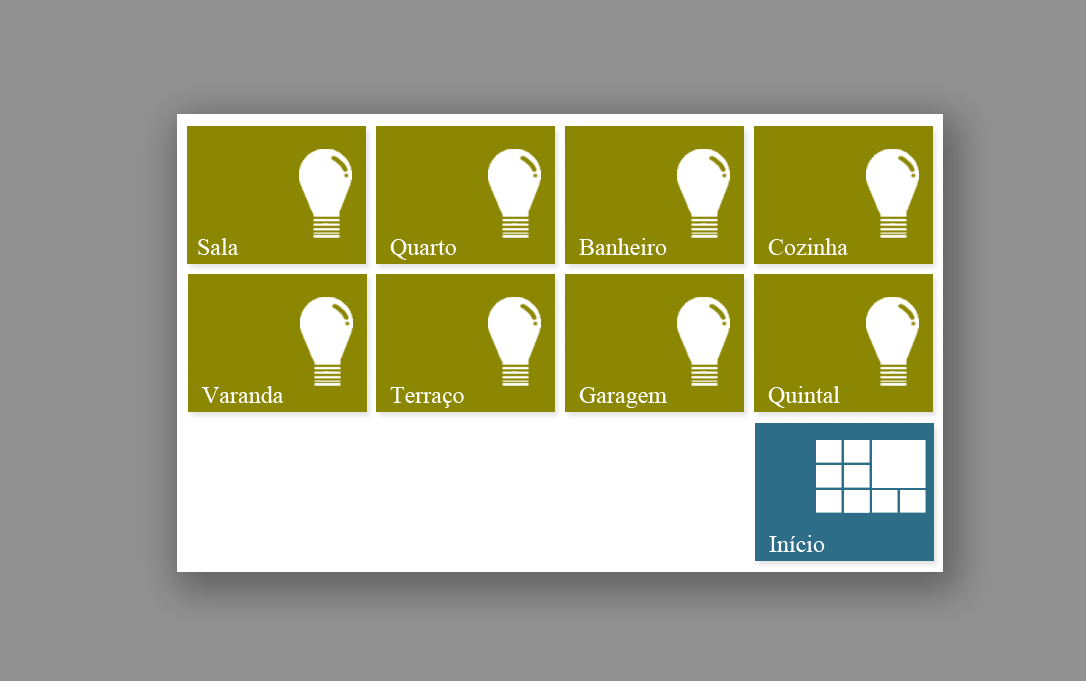
<style>
.page{position:relative;width:1086px;height:681px;background:#919191}
.page>*{position:absolute;margin:0}
.t1{font:24px "TimesNewRomanPSMT";color:#ffffff}
</style>
<div class="page">
<p class="t1" style="left:390px;top:239px;width:66px;height:21px">Quarto</p>
<p class="t1" style="left:579px;top:238px;width:88px;height:17px">Banheiro</p>
<p class="t1" style="left:768px;top:238px;width:80px;height:17px">Cozinha</p>
<p class="t1" style="left:202px;top:386px;width:82px;height:17px">Varanda</p>
<p class="t1" style="left:390px;top:387px;width:74px;height:21px">Terraço</p>
<p class="t1" style="left:579px;top:387px;width:88px;height:21px">Garagem</p>
<p class="t1" style="left:768px;top:386px;width:72px;height:22px">Quintal</p>
<p class="t1" style="left:769px;top:535px;width:56px;height:17px">Início</p>
</div>
